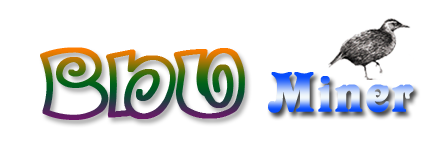
<style>
.page{position:relative;width:439px;height:141px;background:#ffffff}
.page>*{position:absolute;margin:0}
.t1{font:77.8px "D3-Spiralism-Outline";font-weight:bold}
.t2{font:60px "VictorianLetPlain";letter-spacing:0.03em;font-weight:bold}
</style>
<div class="page">
<p class="t1" style="left:40px;top:47px;width:205px;height:73px">BNU</p>
<p class="t2" style="left:268px;top:72px;width:146px;height:41px">Miner</p>
</div>
